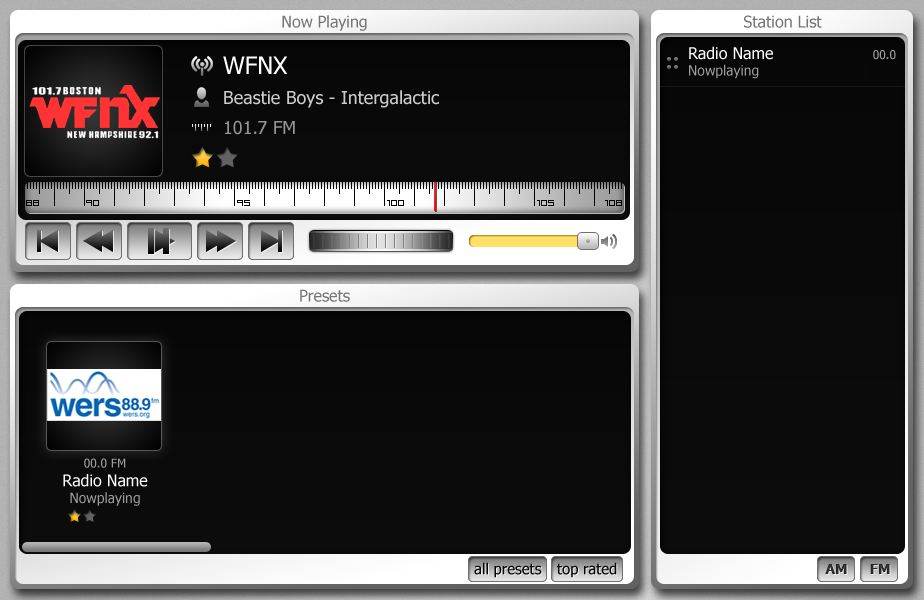
<style>
.page{position:relative;width:924px;height:600px}
.page>*{position:absolute;margin:0}
.t1{font:16px "Tahoma";color:#757575}
.t2{font:16px "Tahoma";color:#ffffff}
.t3{font:12px "Tahoma";color:#9e9e9e}
.t4{font:24px "Tahoma";color:#ffffff}
.t5{font:14px "Tahoma";color:#9e9e9e}
.t6{font:18px "Tahoma";color:#cbcbcb}
.t7{font:18px "Tahoma";color:#949494}
.t8{font:15px "Tahoma";color:#060606}
</style>
<div class="page">
<p class="t1" style="left:282px;top:15px;width:85px;height:16px">Now Playing</p>
<p class="t1" style="left:744px;top:15px;width:78px;height:13px">Station List</p>
<p class="t2" style="left:689px;top:46px;width:84px;height:14px">Radio Name</p>
<p class="t3" style="left:873px;top:50px;width:23px;height:10px">00.0</p>
<p class="t4" style="left:223px;top:56px;width:65px;height:18px">WFNX</p>
<p class="t5" style="left:689px;top:64px;width:70px;height:15px">Nowplaying</p>
<p class="t6" style="left:224px;top:90px;width:215px;height:18px">Beastie Boys - Intergalactic</p>
<p class="t7" style="left:225px;top:120px;width:70px;height:15px">101.7 FM</p>
<p class="t1" style="left:300px;top:289px;width:50px;height:13px">Presets</p>
<p class="t3" style="left:84px;top:458px;width:42px;height:10px">00.0 FM</p>
<p class="t2" style="left:63px;top:474px;width:85px;height:13px"><span class="t3"><br></span>Radio Name</p>
<p class="t5" style="left:70px;top:492px;width:70px;height:14px">Nowplaying</p>
<p class="t8" style="left:474px;top:562px;width:68px;height:16px">all presets</p>
<p class="t8" style="left:557px;top:562px;width:60px;height:16px">top rated</p>
</div>
